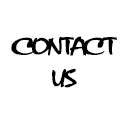
<style>
.page{position:relative;width:125px;height:125px;background:#ffffff}
.page>*{position:absolute;margin:0}
.t1{font:18px "VNI-Thufap1";color:#010000;font-weight:bold}
.t2{font:18px "VNI-Thufap1";color:#000000;font-weight:bold}
</style>
<div class="page">
<p class="t1" style="left:11px;top:36px;width:106px;height:20px">CONTACT</p>
<p class="t2" style="left:52px;top:68px;width:25px;height:20px">US</p>
</div>
